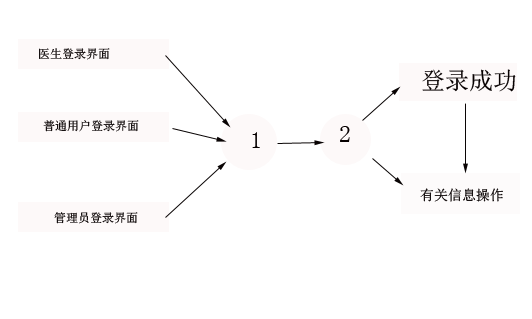
<style>
.page{position:relative;width:532px;height:319px;background:#ffffff}
.page>*{position:absolute;margin:0}
.t1{font:12px "SimSun"}
.t2{font:24px "SimSun";color:#060000}
.t3{font:12px "SimSun";color:#060000}
.t4{font:14px "SimSun"}
</style>
<div class="page">
<p class="t1" style="left:39px;top:48px;width:71px;height:12px">医生登录界面</p>
<p class="t2" style="left:422px;top:69px;width:94px;height:23px">登录成功</p>
<p class="t3" style="left:43px;top:120px;width:96px;height:12px">普通用户登录界面</p>
<p class="t2" style="left:340px;top:126px;width:10px;height:16px">2</p>
<p class="t2" style="left:252px;top:132px;width:8px;height:16px">1</p>
<p class="t4" style="left:420px;top:188px;width:83px;height:14px">有关信息操作</p>
<p class="t1" style="left:54px;top:212px;width:84px;height:12px">管理员登录界面</p>
</div>
